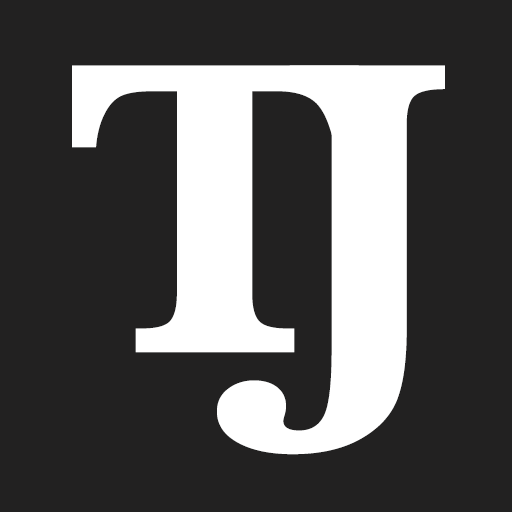
<style>
.page{position:relative;width:512px;height:512px;background:#222121}
.page>*{position:absolute;margin:0}
.t1{font:432.7px "Baskerville-Bold";color:#ffffff;font-variant:small-caps}
</style>
<div class="page">
<p class="t1" style="left:72px;top:65px;width:373px;height:390px">TJ</p>
</div>
